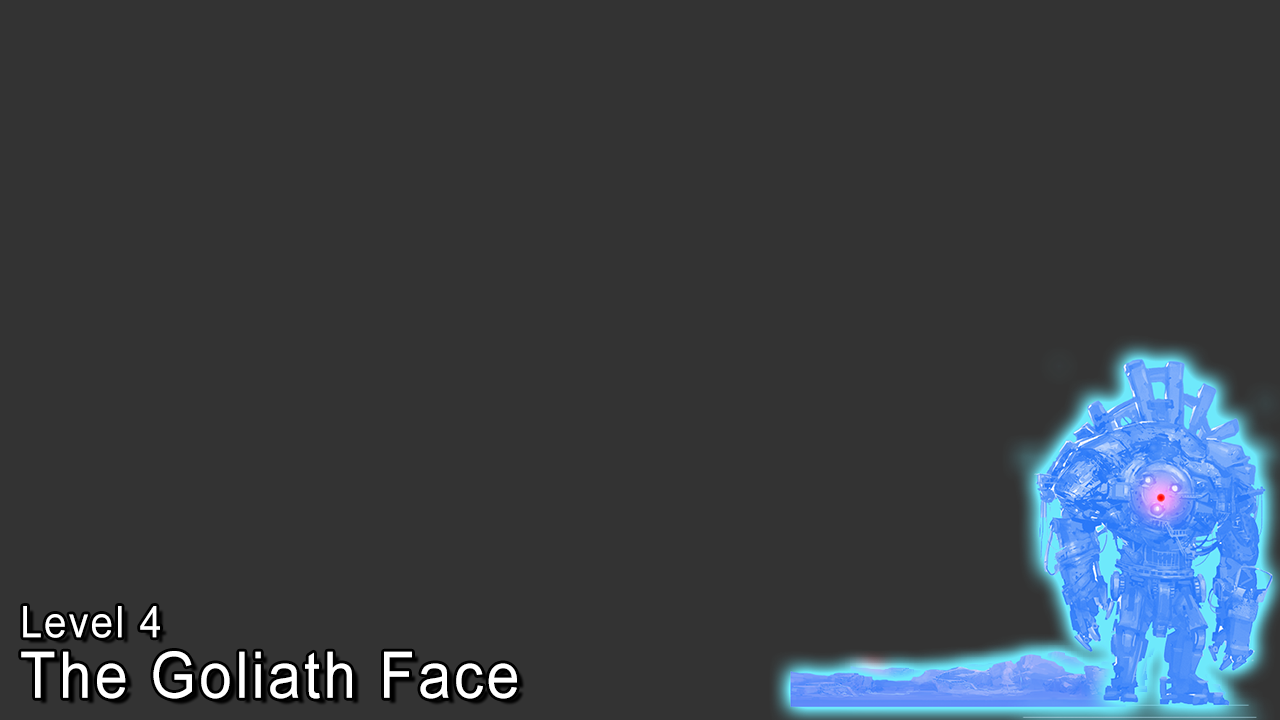
<style>
.page{position:relative;width:1280px;height:720px;background:#333333}
.page>*{position:absolute;margin:0}
.t1{font:43.5px "ArialMT";letter-spacing:0.06em;color:#ffffff;scale:0.91 1}
.t2{font:64px "ArialMT";letter-spacing:0.06em;color:#ffffff;scale:0.91 1}
</style>
<div class="page">
<p class="t1" style="left:23px;top:606px;width:137px;height:32px">Level 4</p>
<p class="t2" style="left:21px;top:651px;width:496px;height:48px">The Goliath Face</p>
</div>
